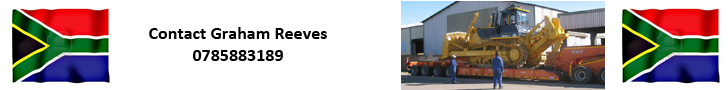
<style>
.page{position:relative;width:728px;height:90px;background:#ffffff}
.page>*{position:absolute;margin:0}
.t1{font:18px "Calibri-Bold";color:#000000}
</style>
<div class="page">
<p class="t1" style="left:149px;top:27px;width:178px;height:34px;text-align:center">Contact Graham Reeves<br>0785883189</p>
</div>
